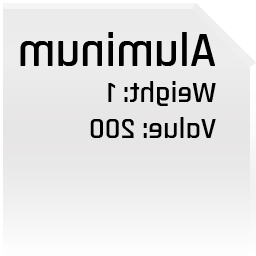
<style>
.page{position:relative;width:256px;height:256px}
.page>*{position:absolute;margin:0}
.t1{font:30px "Rajdhani-SemiBold";color:#000000}
.t2{font:48px "Rajdhani-SemiBold";color:#000000}
</style>
<div class="page">
<p class="t1" style="left:20px;top:32px;width:196px;height:106px;rotate:180deg"><span class="t2">Aluminum<br></span>Weight: 1<br>Value: 200</p>
</div>
